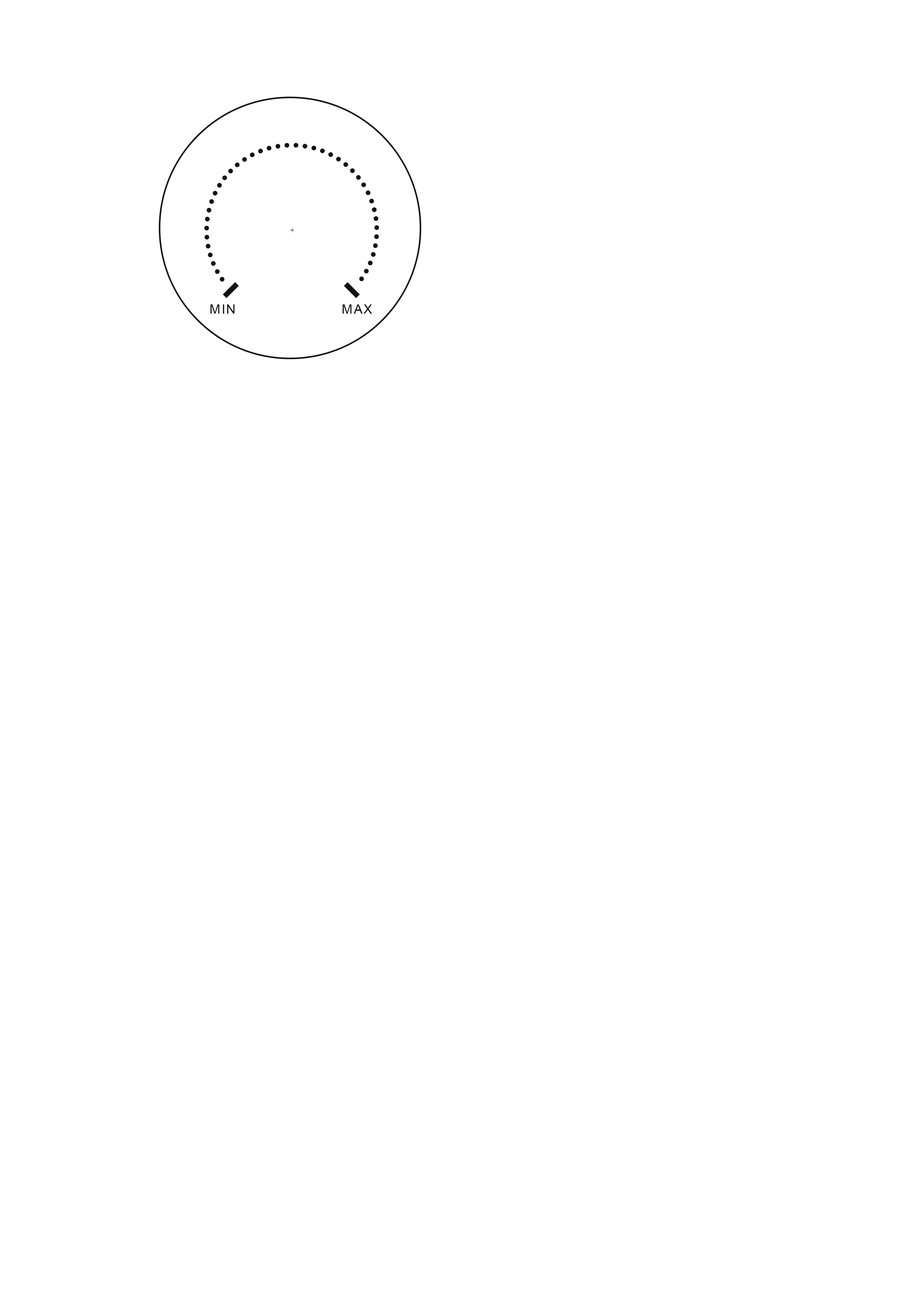
<style>
.page{position:relative;width:918px;height:1299px;background:#ffffff}
.page>*{position:absolute;margin:0}
.t1{font:13.1px "ArialMT";letter-spacing:0.08em;color:#000000}
</style>
<div class="page">
<p class="t1" style="left:210px;top:304px;width:25px;height:10px">MIN</p>
<p class="t1" style="left:342px;top:304px;width:30px;height:10px">MAX</p>
</div>
